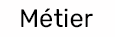
<style>
.page{position:relative;width:115px;height:37px;background:#fffefe}
.page>*{position:absolute;margin:0}
.t1{font:25.4px "Rubik-Regular";color:#000000}
</style>
<div class="page">
<p class="t1" style="left:21px;top:8px;width:72px;height:20px">Métier</p>
</div>
